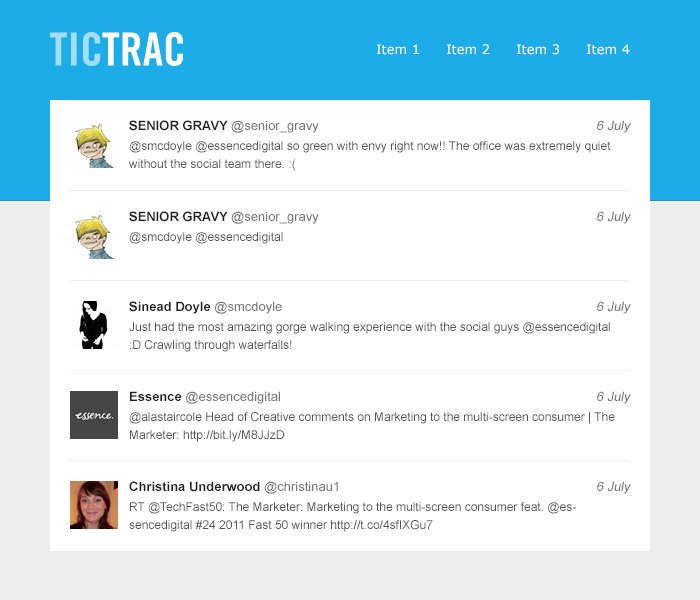
<style>
.page{position:relative;width:700px;height:600px;background:#ffffff}
.page>*{position:absolute;margin:0}
.t1{font:13px "Verdana";color:#ffffff}
.t2{font:13px "ArialMT";color:#777777}
.t3{font:13px "Arial-BoldMT";color:#222222}
.t4{font:13px "ArialMT";color:#777777;font-style:italic}
.t5{font:12px/18px "ArialMT";color:#555555}
.t6{font:12px "ArialMT";color:#555555}
</style>
<div class="page">
<p class="t1" style="left:377px;top:44px;width:42px;height:11px">Item 1</p>
<p class="t1" style="left:447px;top:44px;width:43px;height:11px">Item 2</p>
<p class="t1" style="left:517px;top:44px;width:42px;height:11px">Item 3</p>
<p class="t1" style="left:587px;top:44px;width:43px;height:11px">Item 4</p>
<p class="t2" style="left:129px;top:120px;width:190px;height:13px"><span class="t3">SENIOR GRAVY </span>@senior_gravy</p>
<p class="t4" style="left:597px;top:120px;width:34px;height:13px">6 July</p>
<p class="t5" style="left:129px;top:141px;width:482px;height:30px">@smcdoyle @essencedigital so green with envy right now!! The office was extremely quiet without the social team there. :(</p>
<p class="t2" style="left:129px;top:211px;width:190px;height:13px"><span class="t3">SENIOR GRAVY </span>@senior_gravy</p>
<p class="t4" style="left:597px;top:211px;width:34px;height:13px">6 July</p>
<p class="t6" style="left:129px;top:232px;width:154px;height:12px">@smcdoyle @essencedigital</p>
<p class="t3" style="left:129px;top:301px;width:153px;height:13px">Sinead Doyle <span class="t2">@smcdoyle</span></p>
<p class="t4" style="left:597px;top:301px;width:34px;height:13px">6 July</p>
<p class="t5" style="left:129px;top:322px;width:481px;height:30px">Just had the most amazing gorge walking experience with the social guys @essencedigital :D Crawling through waterfalls!</p>
<p class="t2" style="left:130px;top:391px;width:150px;height:13px"><span class="t3">Essence </span>@essencedigital</p>
<p class="t4" style="left:597px;top:391px;width:34px;height:13px">6 July</p>
<p class="t5" style="left:129px;top:412px;width:486px;height:30px">@alastaircole Head of Creative comments on Marketing to the multi-screen consumer | The Marketer: http://bit.ly/M8JJzD</p>
<p class="t3" style="left:129px;top:481px;width:209px;height:13px">Christina Underwood <span class="t2">@christinau1</span></p>
<p class="t4" style="left:597px;top:481px;width:34px;height:13px">6 July</p>
<p class="t5" style="left:129px;top:502px;width:447px;height:30px">RT @TechFast50: The Marketer: Marketing to the multi-screen consumer feat. @essencedigital #24 2011 Fast 50 winner http://t.co/4sfIXGu7</p>
</div>
